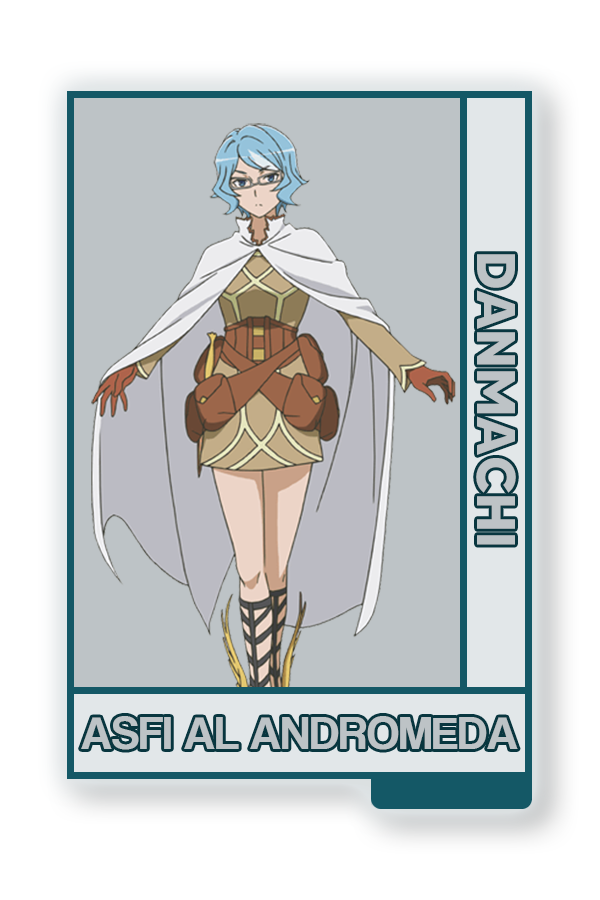
<style>
.page{position:relative;width:600px;height:900px;background:#bdc3c6}
.page>*{position:absolute;margin:0}
.t1{font:54.4px "MADETOMMY-Bold";color:#bdc3c6}
.t2{font:48px "CoolveticaRg-Regular";color:#bdc3c6}
</style>
<div class="page">
<p class="t1" style="left:476px;top:254px;width:40px;height:291px;rotate:90deg">DANMACHI</p>
<p class="t2" style="left:81px;top:716px;width:437px;height:34px">ASFI AL ANDROMEDA</p>
</div>
